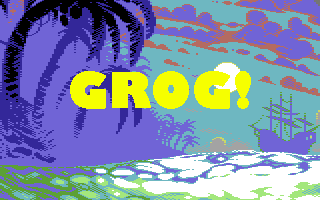
<style>
.page{position:relative;width:320px;height:200px;background:#7064d6}
.page>*{position:absolute;margin:0}
.t1{font:48px "GillSans-UltraBold";color:#f6ff00}
</style>
<div class="page">
<p class="t1" style="left:70px;top:71px;width:181px;height:38px">GROG!</p>
</div>
